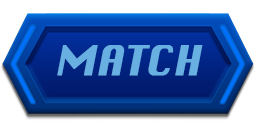
<style>
.page{position:relative;width:257px;height:128px;background:#ffffff}
.page>*{position:absolute;margin:0}
.t1{font:39.9px "Silom";color:#67b0e1;font-weight:bold;font-style:italic}
</style>
<div class="page">
<p class="t1" style="left:57px;top:45px;width:146px;height:31px">MATCH</p>
</div>
